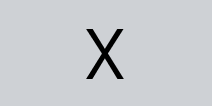
<style>
.page{position:relative;width:212px;height:106px;background:#ced1d5}
.page>*{position:absolute;margin:0}
.t1{font:72px "AndaleMono";color:#000000}
</style>
<div class="page">
<p class="t1" style="left:86px;top:29px;width:38px;height:50px">X</p>
</div>
